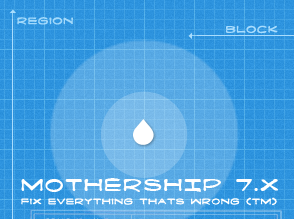
<style>
.page{position:relative;width:294px;height:219px}
.page>*{position:absolute;margin:0}
.t1{font:8px "FanboyHardcore";letter-spacing:0.05em;color:#a2d9fb}
.t2{font:8px "FanboyHardcore";letter-spacing:0.05em;color:#a8dcfd}
.t3{font:15px "FanboyHardcore";letter-spacing:0.05em;color:#ffffff;text-transform:uppercase}
.t4{font:7px "FanboyHardcore";letter-spacing:0.05em;color:#ffffff}
</style>
<div class="page">
<p class="t1" style="left:17px;top:17px;width:56px;height:8px">region</p>
<p class="t2" style="left:226px;top:25px;width:52px;height:9px">block</p>
<p class="t3" style="left:21px;top:178px;width:257px;height:14px">mothership 7.x</p>
<p class="t4" style="left:21px;top:197px;width:256px;height:9px">fix everything thats wrong (tm)</p>
</div>
